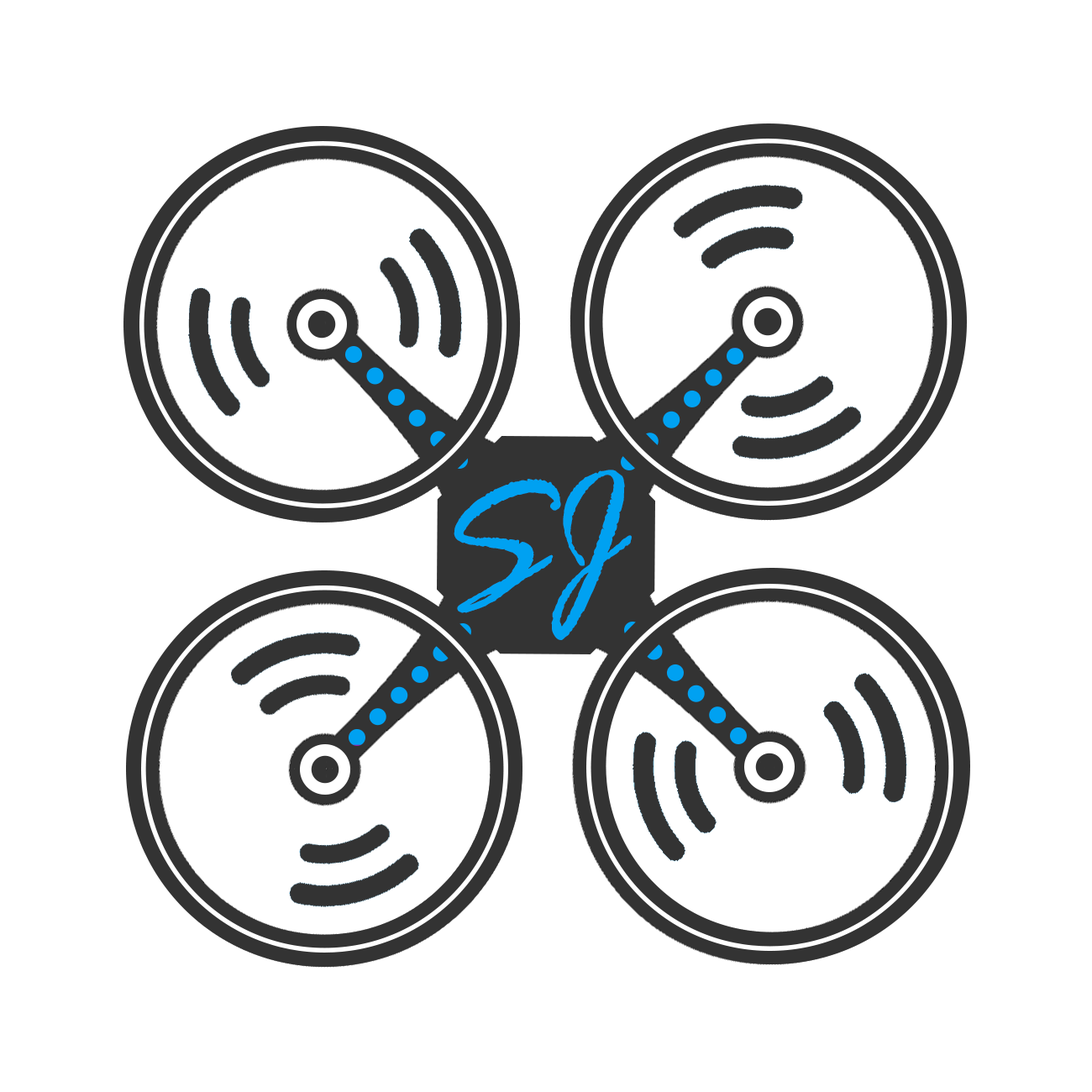
<style>
.page{position:relative;width:1092px;height:1092px;background:#ffffff}
.page>*{position:absolute;margin:0}
.t1{font:175px "RageItalic";color:#00a1f1}
</style>
<div class="page">
<p class="t1" style="left:551px;top:470px;width:81px;height:170px;rotate:-4deg">J</p>
<p class="t1" style="left:454px;top:479px;width:107px;height:134px;rotate:-6deg">S</p>
</div>
